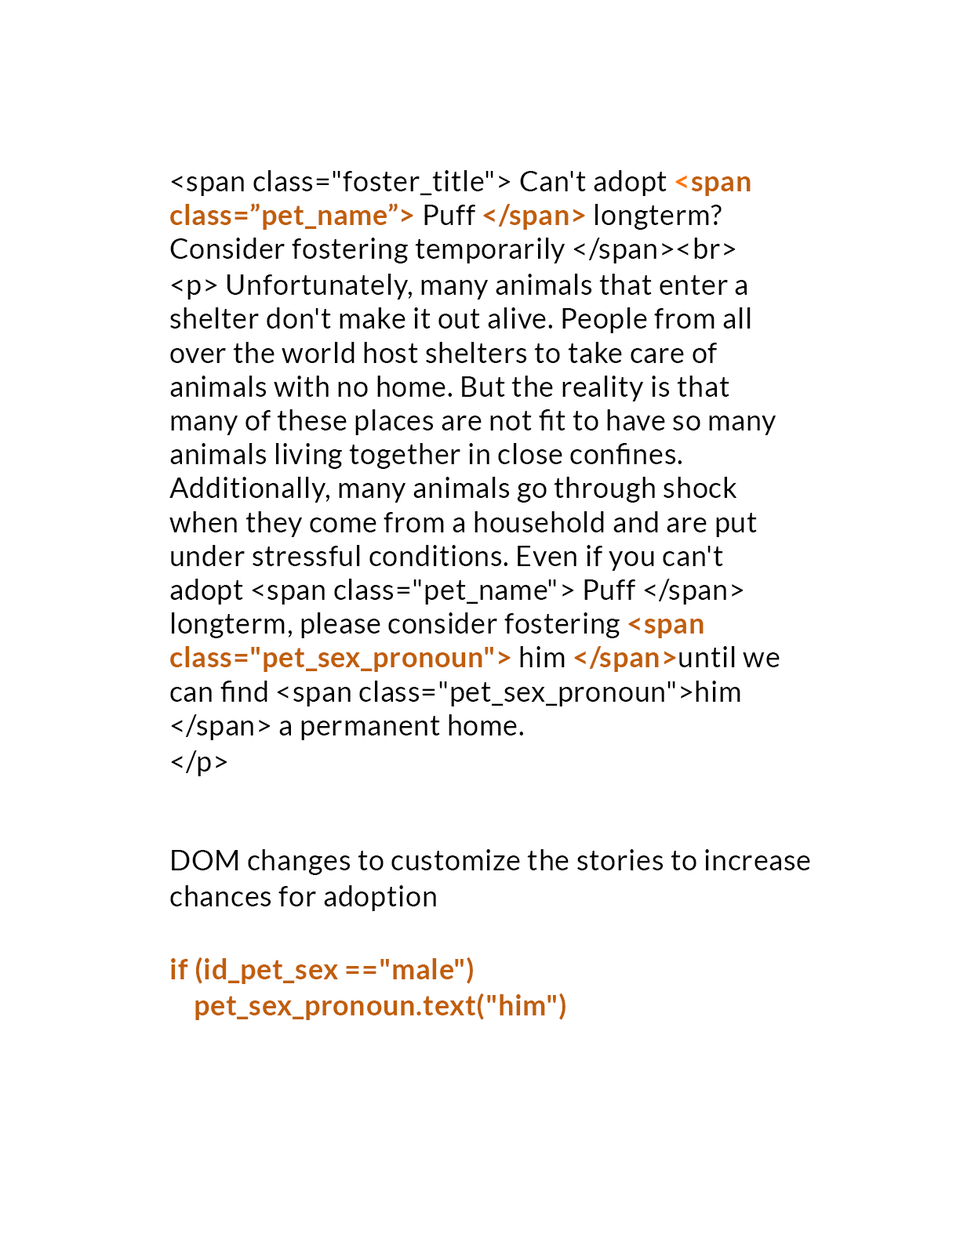
<style>
.page{position:relative;width:960px;height:1242px;background:#ffffff}
.page>*{position:absolute;margin:0}
.t1{font:28.2px "Lato-Regular";letter-spacing:0.02em;color:#000000}
.t2{font:28.2px "Lato-Bold";letter-spacing:0.02em;color:#ff7700}
.t3{font:28.2px "Lato-Bold";letter-spacing:0.02em;color:#c15e08}
</style>
<div class="page">
<p class="t1" style="left:169px;top:170px;width:611px;height:606px">&lt;span class="foster_title"&gt; Can't adopt <span class="t2">&lt;</span><span class="t3">span class=”pet_name”&gt;</span> Puff <span class="t3">&lt;/span&gt;</span> longterm? Consider fostering temporarily &lt;/span&gt;&lt;br&gt;<br>&lt;p&gt; Unfortunately, many animals that enter a shelter don't make it out alive. People from all over the world host shelters to take care of animals with no home. But the reality is that many of these places are not fit to have so many animals living together in close confines. Additionally, many animals go through shock when they come from a household and are put under stressful conditions. Even if you can't adopt &lt;span class="pet_name"&gt; Puff &lt;/span&gt; longterm, please consider fostering <span class="t3">&lt;span class="pet_sex_pronoun"&gt;</span> him <span class="t3">&lt;/span&gt;</span>until we can find &lt;span class="pet_sex_pronoun"&gt;him &lt;/span&gt; a permanent home.<br>&lt;/p&gt;</p>
<p class="t1" style="left:170px;top:849px;width:640px;height:171px">DOM changes to customize the stories to increase<br>chances for adoption<br><br><span class="t3">if (id_pet_sex =="male") <br>    pet_sex_pronoun.text("him")</span></p>
</div>
